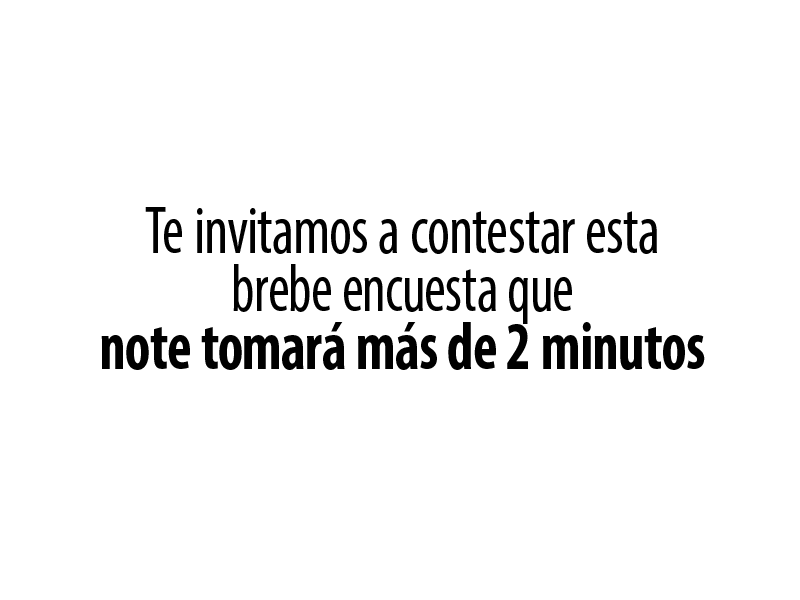
<style>
.page{position:relative;width:800px;height:600px;background:#ffffff}
.page>*{position:absolute;margin:0}
.t1{font:68px/58px "MyriadPro-Cond";color:#000000;scale:0.89 1}
.t2{font:68px/58px "MyriadPro-Cond";color:#000000;scale:0.87 1}
.t3{font:68px/58px "MyriadPro-BoldCond";color:#000000;scale:0.86 1}
.t4{font:68px/58px "MyriadPro-BoldCond";color:#000000;scale:0.88 1}
</style>
<div class="page">
<p class="t1" style="left:101px;top:207px;width:604px;height:163px;text-align:justify">Te invitamos a contestar esta<br><span class="t2">brebe encuesta que<br></span><span class="t3">note tomará más de 2 minu</span><span class="t4">tos</span></p>
</div>
